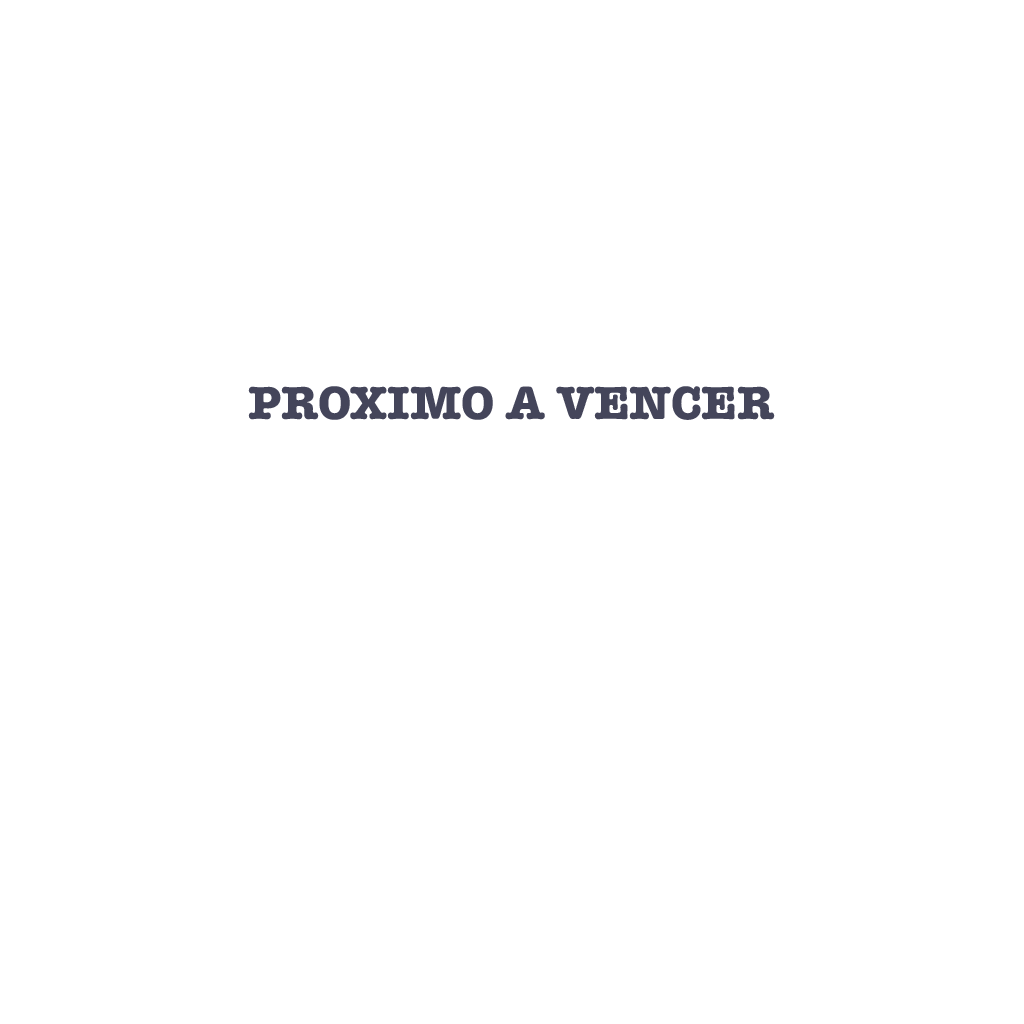
<style>
.page{position:relative;width:1024px;height:1024px;background:#ffffff}
.page>*{position:absolute;margin:0}
.t1{font:48px "AmericanTypewriter-Bold";color:#44455a}
</style>
<div class="page">
<p class="t1" style="left:248px;top:386px;width:527px;height:34px">PROXIMO A VENCER</p>
</div>
